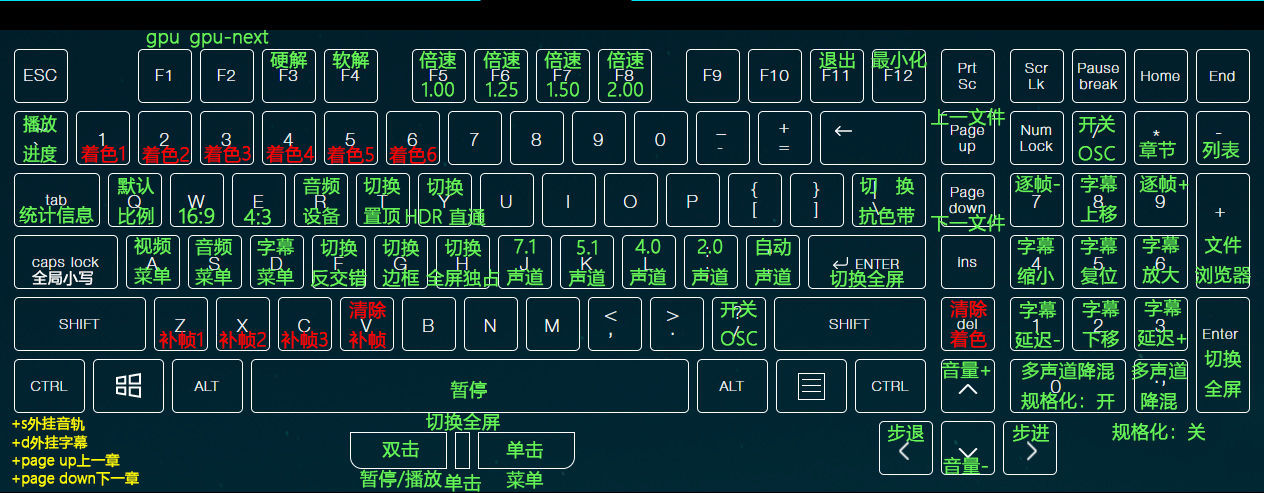
<style>
.page{position:relative;width:1264px;height:493px}
.page>*{position:absolute;margin:0}
.t1{font:18.3px "MicrosoftYaHeiLight";color:#65f556;font-weight:bold}
.t2{font:18.3px/30.4px "MicrosoftYaHeiLight";color:#65f556;font-weight:bold}
.t3{font:18px/30px "MicrosoftYaHeiLight";color:#65f556;font-weight:bold;scale:0.92 1}
.t4{font:18.3px "MicrosoftYaHeiLight";color:#ff0000;font-weight:bold}
.t5{font:18px/30.4px "MicrosoftYaHeiLight";color:#65f556;font-weight:bold}
.t6{font:20px "MicrosoftYaHeiLight";color:#65f556;font-weight:bold}
.t7{font:15px "MicrosoftYaHeiLight";color:#ffffff;font-weight:bold}
.t8{font:18.3px/30.4px "MicrosoftYaHeiLight";color:#ff0000;font-weight:bold}
.t9{font:14px "MicrosoftYaHeiLight";color:#fffc00;font-weight:bold}
.t10{font:14px "MicrosoftYaHeiLight";color:#fffc02;font-weight:bold}
</style>
<div class="page">
<p class="t1" style="left:190px;top:30px;width:79px;height:18px">gpu-next</p>
<p class="t1" style="left:146px;top:33px;width:33px;height:15px">gpu</p>
<p class="t1" style="left:270px;top:51px;width:38px;height:18px">硬解</p>
<p class="t1" style="left:332px;top:51px;width:38px;height:18px">软解</p>
<p class="t2" style="left:419px;top:51px;width:37px;height:46px;text-align:center">倍速<br>1.00</p>
<p class="t2" style="left:483px;top:51px;width:37px;height:46px;text-align:center">倍速<br>1.25</p>
<p class="t2" style="left:544px;top:51px;width:37px;height:46px;text-align:center">倍速<br>1.50</p>
<p class="t2" style="left:607px;top:51px;width:37px;height:46px">倍速<br>2.00</p>
<p class="t1" style="left:819px;top:51px;width:36px;height:18px">退出</p>
<p class="t1" style="left:871px;top:51px;width:56px;height:18px">最小化</p>
<p class="t1" style="left:931px;top:108px;width:74px;height:18px">上一文件</p>
<p class="t3" style="left:23px;top:115px;width:34px;height:48px">播放<br>进度</p>
<p class="t2" style="left:1078px;top:115px;width:37px;height:46px;text-align:center">开关<br>OSC</p>
<p class="t4" style="left:81px;top:145px;width:44px;height:18px">着色1</p>
<p class="t4" style="left:142px;top:146px;width:47px;height:18px">着色2</p>
<p class="t4" style="left:204px;top:145px;width:47px;height:18px">着色3</p>
<p class="t4" style="left:266px;top:145px;width:49px;height:18px">着色4</p>
<p class="t4" style="left:327px;top:146px;width:47px;height:18px">着色5</p>
<p class="t4" style="left:389px;top:146px;width:48px;height:18px">着色6</p>
<p class="t1" style="left:1139px;top:141px;width:37px;height:18px">章节</p>
<p class="t1" style="left:1202px;top:140px;width:38px;height:19px">列表</p>
<p class="t2" style="left:1080px;top:174px;width:38px;height:49px;text-align:center">字幕<br>上移</p>
<p class="t5" style="left:117px;top:177px;width:37px;height:48px;text-align:center">默认<br>比例</p>
<p class="t2" style="left:303px;top:177px;width:37px;height:48px">音频<br>设备</p>
<p class="t2" style="left:363px;top:177px;width:38px;height:48px;text-align:center">切换<br>置顶</p>
<p class="t5" style="left:405px;top:178px;width:81px;height:48px;text-align:center">切换<br>HDR 直通</p>
<p class="t2" style="left:859px;top:177px;width:56px;height:48px;text-align:center">切   换<br>抗色带</p>
<p class="t1" style="left:1015px;top:175px;width:45px;height:18px">逐帧-</p>
<p class="t1" style="left:1139px;top:175px;width:50px;height:18px">逐帧+</p>
<p class="t1" style="left:19px;top:206px;width:75px;height:18px">统计信息</p>
<p class="t6" style="left:179px;top:208px;width:36px;height:16px">16:9</p>
<p class="t6" style="left:243px;top:209px;width:28px;height:16px">4:3</p>
<p class="t1" style="left:931px;top:214px;width:74px;height:18px">下一文件</p>
<p class="t2" style="left:134px;top:237px;width:37px;height:48px">视频<br>菜单</p>
<p class="t2" style="left:195px;top:238px;width:37px;height:48px">音频<br>菜单</p>
<p class="t2" style="left:257px;top:237px;width:37px;height:49px">字幕<br>菜单</p>
<p class="t2" style="left:310px;top:239px;width:57px;height:48px;text-align:center">切换<br>反交错</p>
<p class="t2" style="left:382px;top:239px;width:38px;height:48px;text-align:center">切换<br>边框</p>
<p class="t5" style="left:426px;top:239px;width:74px;height:48px;text-align:center">切换<br>全屏独占</p>
<p class="t5" style="left:506px;top:239px;width:38px;height:47px;text-align:center">7.1<br>声道</p>
<p class="t5" style="left:568px;top:240px;width:38px;height:47px;text-align:center">5.1<br>声道</p>
<p class="t5" style="left:629px;top:239px;width:38px;height:47px;text-align:center">4.0<br>声道</p>
<p class="t5" style="left:691px;top:239px;width:38px;height:47px;text-align:center">2.0<br>声道</p>
<p class="t5" style="left:754px;top:238px;width:38px;height:48px;text-align:center">自动<br>声道</p>
<p class="t2" style="left:1017px;top:236px;width:38px;height:49px;text-align:center">字幕<br>缩小</p>
<p class="t2" style="left:1080px;top:236px;width:38px;height:49px;text-align:center">字幕<br>复位</p>
<p class="t2" style="left:1142px;top:235px;width:38px;height:49px;text-align:center">字幕<br>放大</p>
<p class="t2" style="left:1195px;top:236px;width:56px;height:48px;text-align:center">文件<br>浏览器</p>
<p class="t7" style="left:32px;top:270px;width:61px;height:16px">全局小写</p>
<p class="t1" style="left:830px;top:270px;width:74px;height:18px">切换全屏</p>
<p class="t8" style="left:349px;top:300px;width:37px;height:49px">清除<br>补帧</p>
<p class="t2" style="left:720px;top:300px;width:38px;height:46px">开关<br>OSC</p>
<p class="t8" style="left:950px;top:299px;width:37px;height:49px">清除<br>着色</p>
<p class="t2" style="left:1015px;top:300px;width:45px;height:49px;text-align:center">字幕<br>延迟-</p>
<p class="t2" style="left:1082px;top:299px;width:38px;height:49px;text-align:center">字幕<br>下移</p>
<p class="t2" style="left:1137px;top:298px;width:50px;height:49px;text-align:center">字幕<br>延迟+</p>
<p class="t4" style="left:159px;top:331px;width:44px;height:18px">补帧1</p>
<p class="t4" style="left:219px;top:331px;width:47px;height:18px">补帧2</p>
<p class="t4" style="left:281px;top:331px;width:47px;height:18px">补帧3</p>
<p class="t2" style="left:1204px;top:350px;width:38px;height:48px;text-align:center">切换<br>全屏</p>
<p class="t1" style="left:941px;top:361px;width:50px;height:18px">音量+</p>
<p class="t2" style="left:1021px;top:361px;width:94px;height:49px;text-align:center">多声道降混<br>规格化：开</p>
<p class="t2" style="left:1112px;top:361px;width:93px;height:80px;text-align:center">多声道<br>降混<br>规格化：关</p>
<p class="t1" style="left:450px;top:380px;width:37px;height:19px">暂停</p>
<p class="t2" style="left:426px;top:413px;width:74px;height:79px;text-align:center">切换全屏<br><br>单击</p>
<p class="t9" style="left:12px;top:416px;width:73px;height:15px">+s外挂音轨</p>
<p class="t1" style="left:887px;top:424px;width:37px;height:18px">步退</p>
<p class="t1" style="left:1012px;top:424px;width:37px;height:18px">步进</p>
<p class="t10" style="left:12px;top:435px;width:76px;height:15px">+d外挂字幕</p>
<p class="t2" style="left:360px;top:440px;width:82px;height:48px;text-align:center">双击<br>暂停/播放</p>
<p class="t2" style="left:506px;top:441px;width:38px;height:48px;text-align:center">单击<br>菜单</p>
<p class="t9" style="left:12px;top:453px;width:108px;height:16px">+page up上一章</p>
<p class="t1" style="left:943px;top:457px;width:45px;height:18px">音量-</p>
<p class="t9" style="left:12px;top:471px;width:127px;height:16px">+page down下一章</p>
</div>
